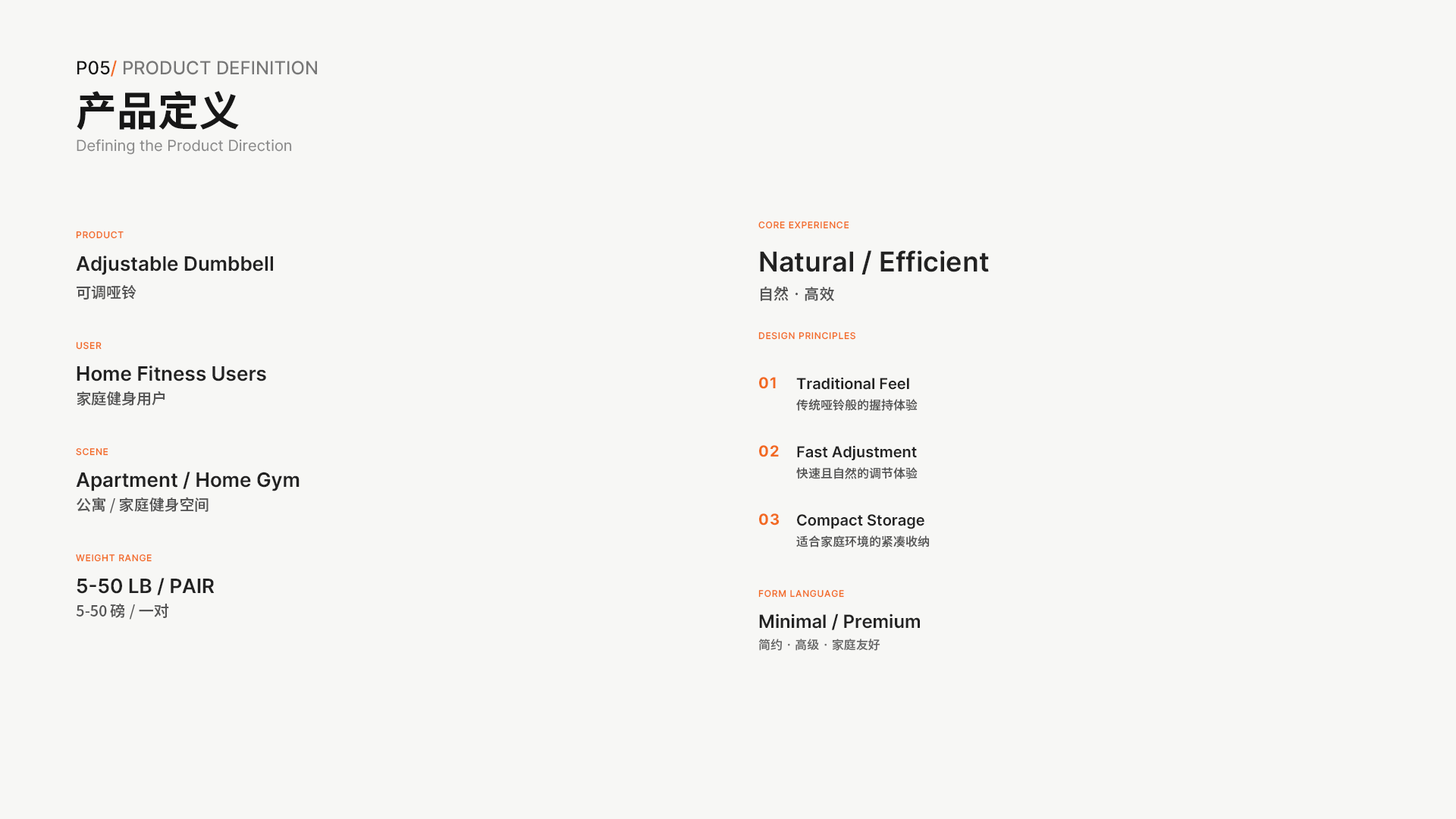
<style>
.page{position:relative;width:1456px;height:819px;background:#f7f7f5}
.page>*{position:absolute;margin:0}
.t1{font:18.2px "Inter-Medium";color:#777777}
.t2{font:18.2px "Inter-Medium";color:#111111}
.t3{font:18.2px "Inter-Medium";color:#f26a21}
.t4{font:40.9px "SourceHanSansSC-Bold";color:#171717}
.t5{font:15.2px "Inter-Regular";color:#888888}
.t6{font:9.1px "Inter-Medium";letter-spacing:0.06em;color:#f26a21}
.t7{font:19.7px "Inter-SemiBold";color:#222222}
.t8{font:27.3px "Inter-SemiBold";color:#222222}
.t9{font:15.2px "SourceHanSansSC-Medium";color:#555555}
.t10{font:15.2px "Inter-Bold";letter-spacing:0.06em;color:#f26a21}
.t11{font:15.2px "Inter-SemiBold";color:#222222}
.t12{font:12.1px "SourceHanSansSC-Medium";color:#555555}
.t13{font:18.2px "Inter-SemiBold";color:#222222}
.t14{font:12.1px "SourceHanSansSC-Medium";color:#666666}
</style>
<div class="page">
<p class="t1" style="left:77px;top:60px;width:240px;height:17px"><span class="t2">P05</span><span class="t3">/ </span>PRODUCT DEFINITION</p>
<p class="t4" style="left:77px;top:90px;width:162px;height:40px">产品定义</p>
<p class="t5" style="left:77px;top:139px;width:215px;height:16px">Defining the Product Direction</p>
<p class="t6" style="left:758px;top:221px;width:91px;height:8px">CORE EXPERIENCE</p>
<p class="t6" style="left:76px;top:231px;width:48px;height:8px">PRODUCT</p>
<p class="t7" style="left:76px;top:256px;width:197px;height:19px">Adjustable Dumbbell</p>
<p class="t8" style="left:760px;top:250px;width:229px;height:25px">Natural / Efficient</p>
<p class="t9" style="left:77px;top:284px;width:59px;height:16px">可调哑铃</p>
<p class="t9" style="left:761px;top:286px;width:73px;height:15px">自然 · 高效</p>
<p class="t6" style="left:758px;top:332px;width:97px;height:8px">DESIGN PRINCIPLES</p>
<p class="t6" style="left:76px;top:342px;width:26px;height:8px">USER</p>
<p class="t7" style="left:77px;top:366px;width:189px;height:15px">Home Fitness Users</p>
<p class="t10" style="left:759px;top:377px;width:17px;height:12px">01</p>
<p class="t11" style="left:796px;top:377px;width:113px;height:13px">Traditional Feel</p>
<p class="t9" style="left:77px;top:391px;width:88px;height:15px">家庭健身用户</p>
<p class="t12" style="left:796px;top:399px;width:122px;height:12px">传统哑铃般的握持体验</p>
<p class="t6" style="left:76px;top:448px;width:32px;height:8px">SCENE</p>
<p class="t10" style="left:759px;top:445px;width:20px;height:12px">02</p>
<p class="t11" style="left:797px;top:445px;width:120px;height:15px">Fast Adjustment</p>
<p class="t7" style="left:76px;top:472px;width:224px;height:19px">Apartment / Home Gym</p>
<p class="t12" style="left:796px;top:467px;width:122px;height:12px">快速且自然的调节体验</p>
<p class="t9" style="left:77px;top:497px;width:132px;height:16px">公寓 / 家庭健身空间</p>
<p class="t10" style="left:759px;top:513px;width:21px;height:13px">03</p>
<p class="t11" style="left:797px;top:514px;width:127px;height:15px">Compact Storage</p>
<p class="t12" style="left:796px;top:535px;width:133px;height:13px">适合家庭环境的紧凑收纳</p>
<p class="t6" style="left:76px;top:554px;width:76px;height:8px">WEIGHT RANGE</p>
<p class="t7" style="left:77px;top:578px;width:138px;height:17px">5-50 LB / PAIR</p>
<p class="t6" style="left:758px;top:590px;width:86px;height:8px">FORM LANGUAGE</p>
<p class="t9" style="left:76px;top:604px;width:93px;height:16px">5-50 磅 / 一对</p>
<p class="t13" style="left:759px;top:613px;width:161px;height:17px">Minimal / Premium</p>
<p class="t14" style="left:758px;top:639px;width:122px;height:12px">简约 · 高级 · 家庭友好</p>
</div>
